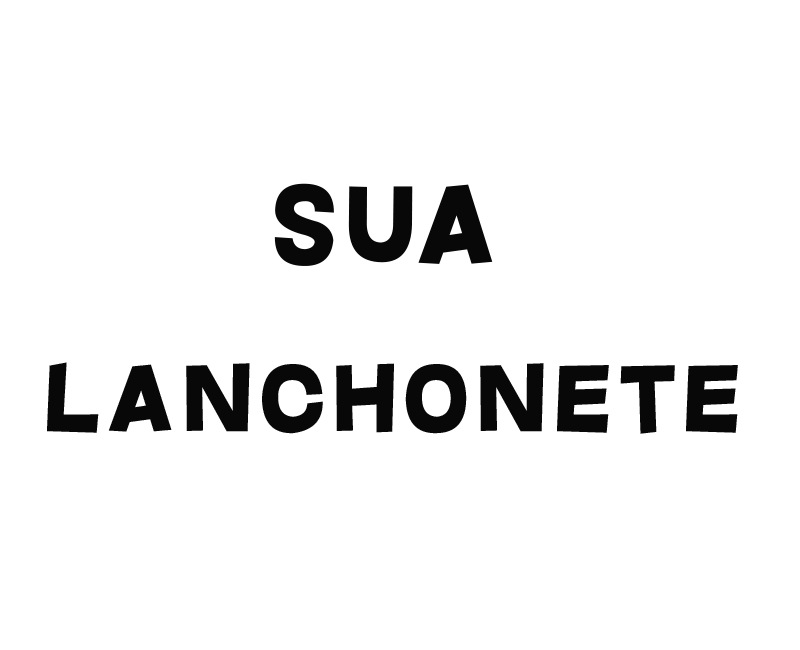
<style>
.page{position:relative;width:800px;height:650px;background:#ffffff}
.page>*{position:absolute;margin:0}
.t1{font:109.9px "Questrian";letter-spacing:0.1em;color:#080808}
.t2{font:93px "Questrian";letter-spacing:0.1em;color:#080808}
</style>
<div class="page">
<p class="t1" style="left:274px;top:183px;width:219px;height:83px">sua</p>
<p class="t2" style="left:47px;top:362px;width:691px;height:72px">lanchonete</p>
</div>
